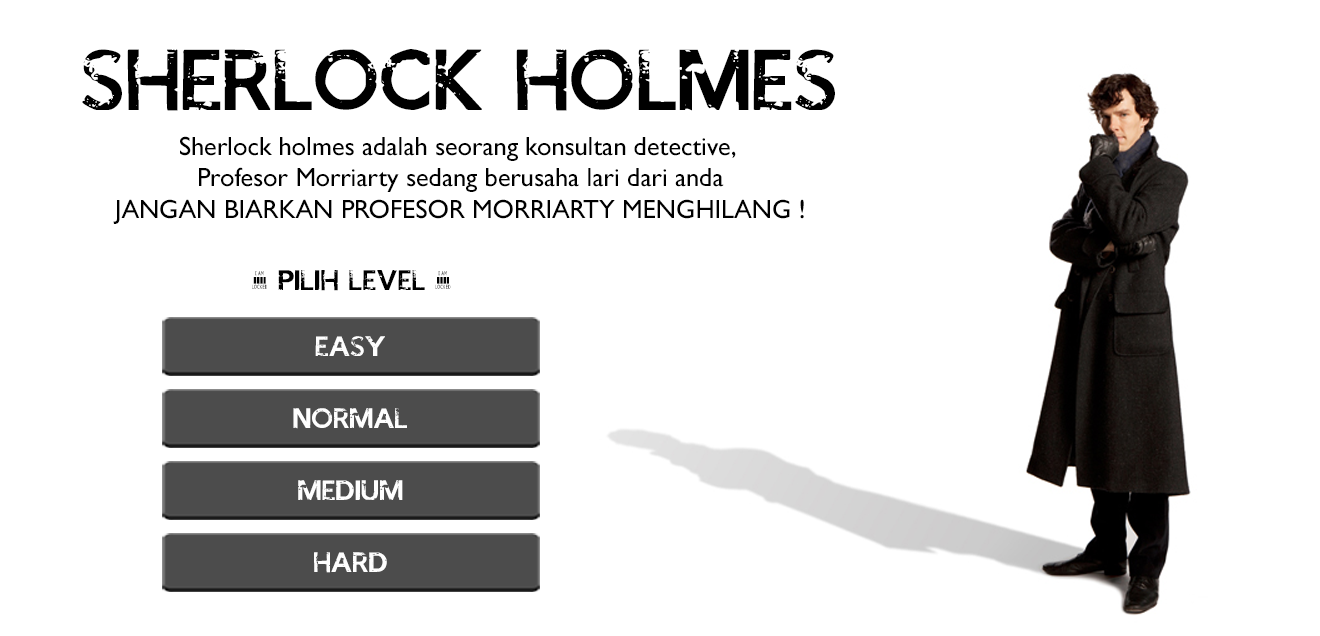
<style>
.page{position:relative;width:1320px;height:636px;background:#ffffff}
.page>*{position:absolute;margin:0}
.t1{font:60.4px "IAMSHERLOCKED";color:#000000}
.t2{font:26.2px "GillSansMT";color:#000000}
.t3{font:20.1px "IAMSHERLOCKED";color:#000000}
.t4{font:19.6px "IAMSHERLOCKED";color:#fefefe}
</style>
<div class="page">
<p class="t1" style="left:82px;top:49px;width:753px;height:62px">SHERLOCK HOLMES</p>
<p class="t2" style="left:113px;top:136px;width:691px;height:88px;text-align:center">Sherlock holmes adalah seorang konsultan detective, <br>Profesor Morriarty sedang berusaha lari dari anda<br>JANGAN BIARKAN PROFESOR MORRIARTY MENGHILANG !</p>
<p class="t3" style="left:252px;top:270px;width:199px;height:21px">- PILIH LEVEL -</p>
<p class="t4" style="left:315px;top:336px;width:70px;height:20px">EASY</p>
<p class="t4" style="left:293px;top:408px;width:114px;height:21px">NORMAL</p>
<p class="t4" style="left:298px;top:480px;width:105px;height:20px">MEDIUM</p>
<p class="t4" style="left:314px;top:552px;width:73px;height:21px">HARD</p>
</div>
